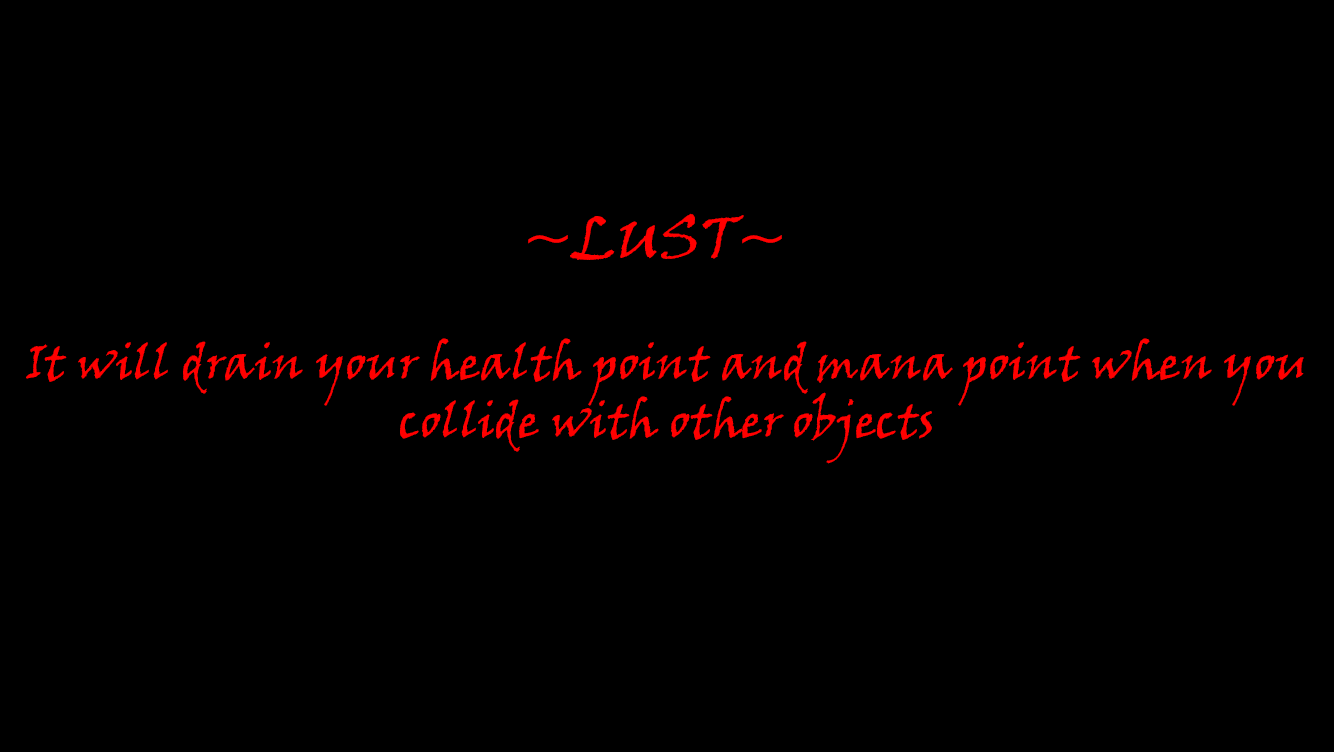
<style>
.page{position:relative;width:1334px;height:752px;background:#000000}
.page>*{position:absolute;margin:0}
.t1{font:60px "VinerHandITC";color:#ff0000}
.t2{font:48px "VinerHandITC";color:#ff0000}
</style>
<div class="page">
<p class="t1" style="left:528px;top:213px;width:254px;height:47px">~LUST~</p>
<p class="t2" style="left:26px;top:338px;width:1278px;height:126px;text-align:center">It will drain your health point and mana point when you collide with other objects</p>
</div>
